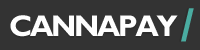
<style>
.page{position:relative;width:200px;height:50px;background:#333333}
.page>*{position:absolute;margin:0}
.t1{font:29.9px "GillSansMT-Bold";letter-spacing:-0.075em;color:#fefefe}
.t2{font:47.1px "GillSansMT-Bold";letter-spacing:-0.075em;color:#4aaca1}
</style>
<div class="page">
<p class="t1" style="left:10px;top:15px;width:168px;height:22px">CANNAPAY</p>
<p class="t2" style="left:181px;top:8px;width:13px;height:34px">/</p>
</div>
